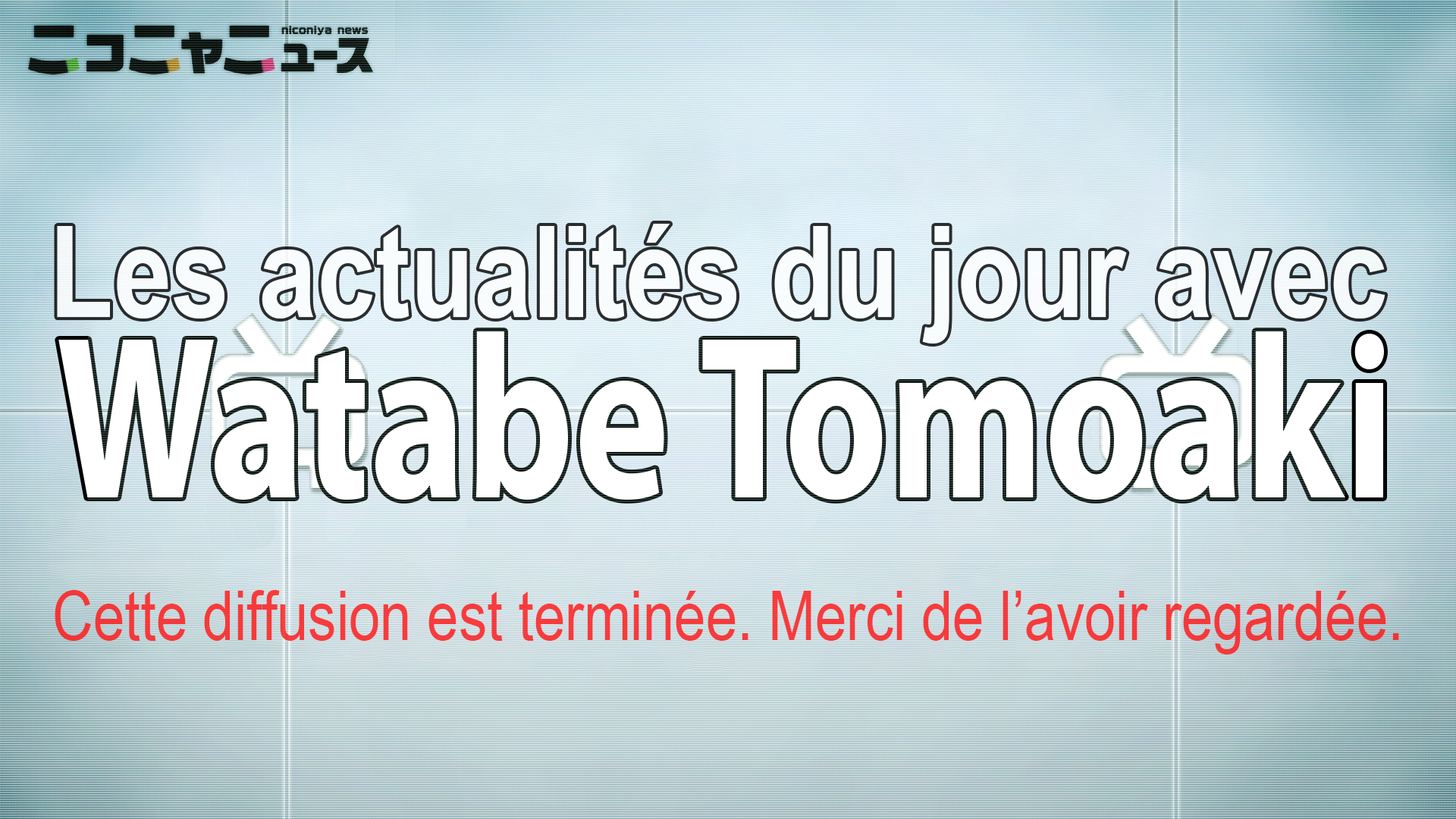
<style>
.page{position:relative;width:1456px;height:819px}
.page>*{position:absolute;margin:0}
.t1{font:127.6px "ArialNarrow-Bold";color:#ffffff}
.t2{font:68.6px "ArialNarrow";color:#f73b3c}
</style>
<div class="page">
<p class="t1" style="left:57px;top:224px;width:1328px;height:120px;opacity:0.91">Les actualités du jour avec</p>
<p class="t2" style="left:55px;top:590px;width:1344px;height:64px">Cette diffusion est terminée. Merci de l’avoir regardée.</p>
</div>
